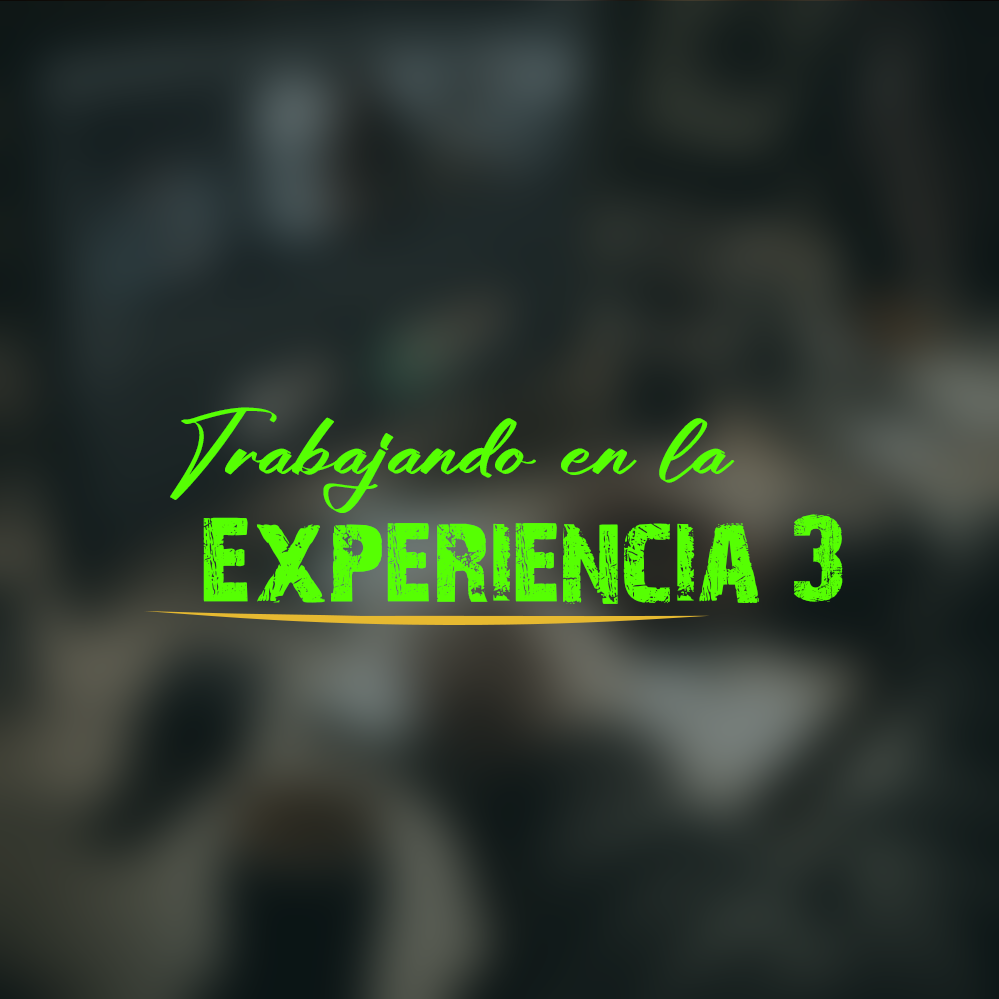
<style>
.page{position:relative;width:999px;height:999px}
.page>*{position:absolute;margin:0}
.t1{font:98px "Giotthany";color:#56ff03}
.t2{font:117px "28-Days-Later-Regular";color:#56ff03}
</style>
<div class="page">
<p class="t1" style="left:170px;top:407px;width:565px;height:106px">Trabajando en la</p>
<p class="t2" style="left:203px;top:514px;width:640px;height:90px">Experiencia 3</p>
</div>
